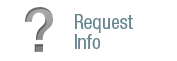
<style>
.page{position:relative;width:177px;height:61px;background:#ffffff}
.page>*{position:absolute;margin:0}
.t1{font:61.6px "HelveticaNeueLTPro-Md";color:#999898}
.t2{font:19.9px/19.9px "HelveticaNeueLTPro-Cn";color:#65858f}
</style>
<div class="page">
<p class="t1" style="left:25px;top:7px;width:28px;height:45px">?</p>
<p class="t2" style="left:75px;top:14px;width:58px;height:35px">Request<br>Info</p>
</div>
